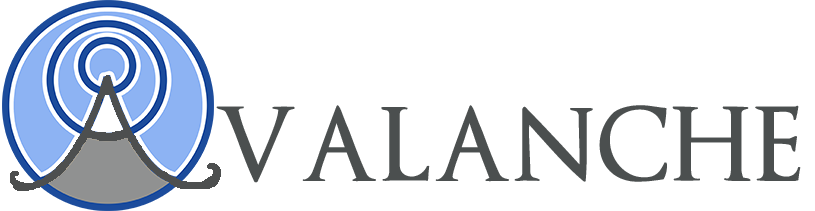
<style>
.page{position:relative;width:815px;height:211px;background:#ffffff}
.page>*{position:absolute;margin:0}
.t1{font:100px "OptimusPrincepsSemiBold";color:#4b4f4f}
</style>
<div class="page">
<p class="t1" style="left:216px;top:105px;width:585px;height:78px">VALANCHE</p>
</div>
